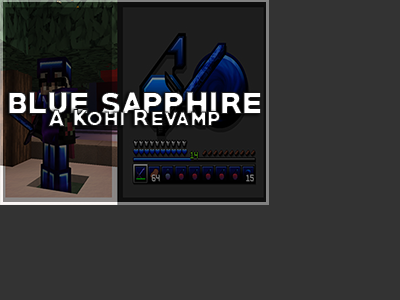
<style>
.page{position:relative;width:400px;height:300px;background:#333333}
.page>*{position:absolute;margin:0}
.t1{font:34px "PRIMETIME-Regular"}
.t2{font:22px "PRIMETIME-Regular"}
</style>
<div class="page">
<p class="t1" style="left:8px;top:91px;width:254px;height:24px">blue sapphire</p>
<p class="t2" style="left:48px;top:109px;width:173px;height:18px">A Kohi Revamp</p>
</div>
